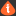
<style>
.page{position:relative;width:16px;height:16px;background:#ff682d}
.page>*{position:absolute;margin:0}
.t1{font:13.3px "UVNCoDien";color:#ffffff;font-weight:bold}
</style>
<div class="page">
<p class="t1" style="left:6px;top:4px;width:4px;height:10px">i</p>
</div>
